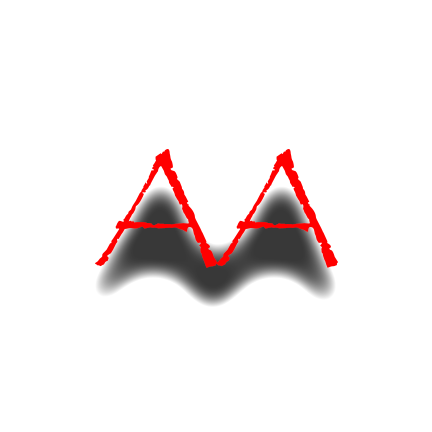
<style>
.page{position:relative;width:432px;height:432px;background:#ffffff}
.page>*{position:absolute;margin:0}
.t1{font:124.5px "Papyrus-Regular";color:#ff0000}
</style>
<div class="page">
<p class="t1" style="left:95px;top:149px;width:244px;height:119px">AA</p>
</div>
